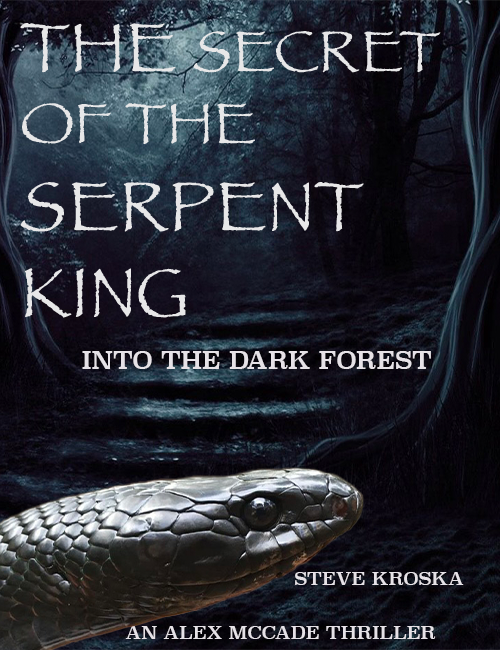
<style>
.page{position:relative;width:500px;height:650px}
.page>*{position:absolute;margin:0}
.t1{font:24px "Superclarendon-Regular";color:#e6e2e7}
.t2{font:18px "Superclarendon-Regular";color:#e6e2e7}
</style>
<div class="page">
<p class="t1" style="left:82px;top:351px;width:349px;height:18px"><span class="t2">     </span>INTO THE DARK FOREST</p>
<p class="t2" style="left:295px;top:572px;width:169px;height:13px">STEVE KROSKA</p>
<p class="t2" style="left:125px;top:626px;width:311px;height:13px">AN ALEX MCCADE THRILLER</p>
</div>
